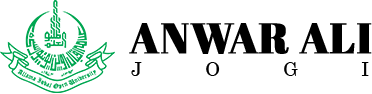
<style>
.page{position:relative;width:372px;height:94px;background:#ffffff}
.page>*{position:absolute;margin:0}
.t1{font:42.5px "AbrilFatface-Regular";color:#000000;text-transform:uppercase;font-weight:bold}
.t2{font:19.1px "Century";letter-spacing:3.3em;color:#000000;text-transform:uppercase}
</style>
<div class="page">
<p class="t1" style="left:129px;top:23px;width:243px;height:31px">Anwar Ali</p>
<p class="t2" style="left:131px;top:62px;width:238px;height:14px">Jogi</p>
</div>
